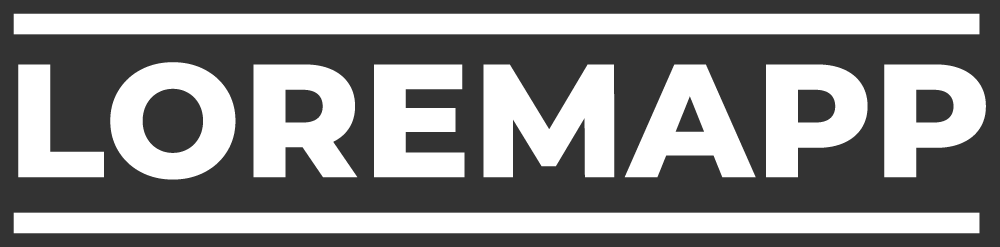
<style>
.page{position:relative;width:1000px;height:247px;background:#333333}
.page>*{position:absolute;margin:0}
.t1{font:160.8px "Montserrat-ExtraBold";letter-spacing:0.01em;color:#ffffff}
</style>
<div class="page">
<p class="t1" style="left:18px;top:62px;width:968px;height:118px">LOREMAPP</p>
</div>
